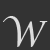
<style>
.page{position:relative;width:50px;height:50px;background:#333333}
.page>*{position:absolute;margin:0}
.t1{font:36px "LucidaCalligraphy-Italic";color:#dddddd}
</style>
<div class="page">
<p class="t1" style="left:3px;top:16px;width:45px;height:31px">W</p>
</div>
